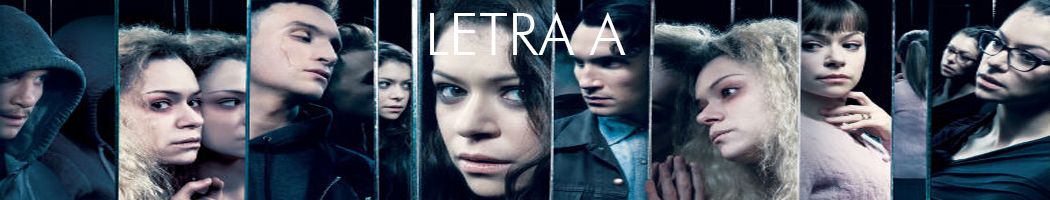
<style>
.page{position:relative;width:1050px;height:200px}
.page>*{position:absolute;margin:0}
.t1{font:58.3px "FuturaBT-Light";color:#ffffff}
</style>
<div class="page">
<p class="t1" style="left:430px;top:12px;width:196px;height:43px">LETRA A</p>
</div>
